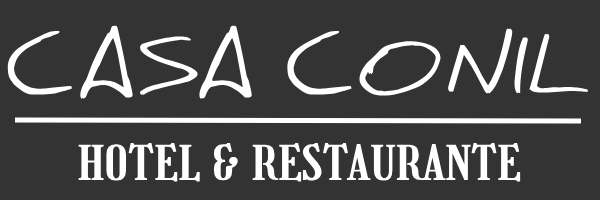
<style>
.page{position:relative;width:600px;height:200px;background:#333333}
.page>*{position:absolute;margin:0}
.t1{font:75px "Daniel-Regular";color:#ffffff;font-weight:bold}
.t2{font:47px "Girassol-Regular";color:#ffffff;font-weight:bold}
</style>
<div class="page">
<p class="t1" style="left:7px;top:25px;width:582px;height:74px">CASA CONIL</p>
<p class="t2" style="left:78px;top:142px;width:443px;height:40px">HOTEL &amp; RESTAURANTE</p>
</div>
